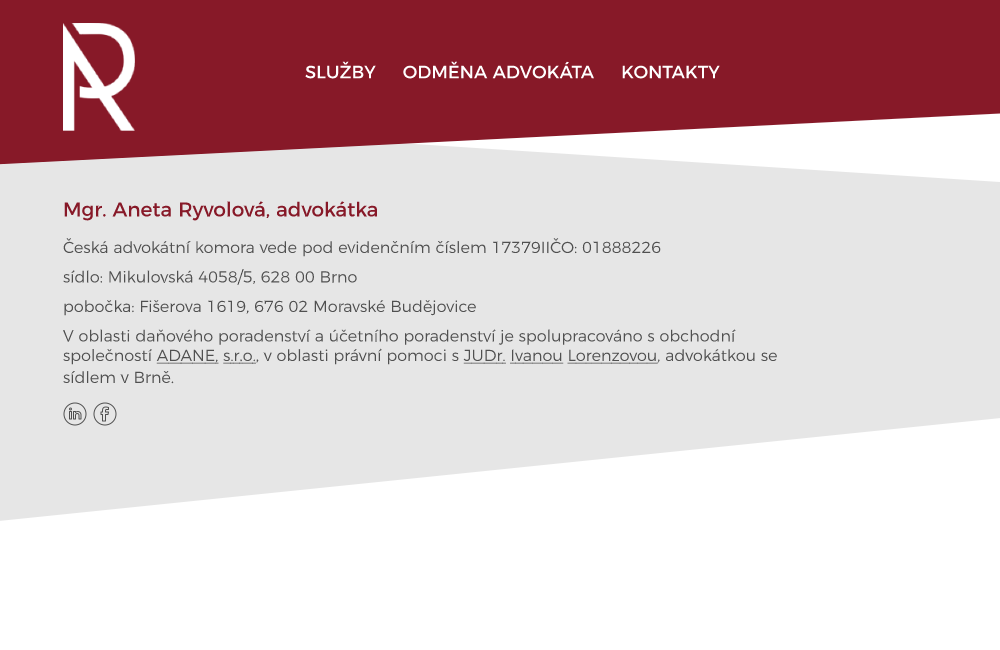
<style>
.page{position:relative;width:1000px;height:650px;background:#e6e6e6}
.page>*{position:absolute;margin:0}
.t1{font:18px "Montserrat-Regular";color:#ffffff}
.t2{font:16px "Montserrat-Light";color:#505050}
.t3{font:20px "Montserrat-Regular";color:#871928}
.t4{font:16px "Montserrat-Light";color:#505050;text-decoration:underline}
</style>
<div class="page">
<p class="t1" style="left:305px;top:61px;width:415px;height:18px">SLUŽBY     ODMĚNA ADVOKÁTA     KONTAKTY</p>
<p class="t2" style="left:63px;top:201px;width:715px;height:183px"><span class="t3">Mgr. Aneta Ryvolová, advokátka<br><br></span>Česká advokátní komora vede pod evidenčním číslem 17379IIČO: 01888226<br>sídlo: Mikulovská 4058/5, 628 00 Brno<br>pobočka: Fišerova 1619, 676 02 Moravské Budějovice<br>V oblasti daňového poradenství a účetního poradenství je spolupracováno s obchodní společností <span class="t4">ADANE, s.r.o.</span>, v oblasti právní pomoci s <span class="t4">JUDr. Ivanou Lorenzovou</span>, advokátkou se sídlem v Brně.</p>
</div>
